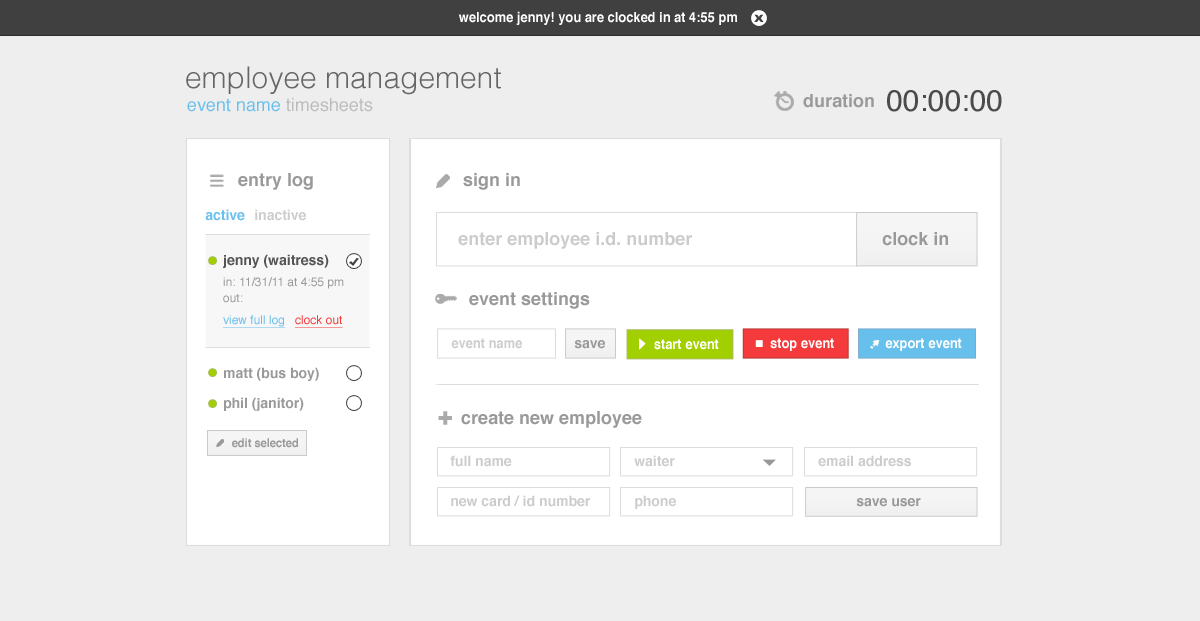
<style>
.page{position:relative;width:1200px;height:621px;background:#eeeeee}
.page>*{position:absolute;margin:0}
.t1{font:14.1px "Helvetica-Bold";color:#ffffff;scale:0.92 1}
.t2{font:14px "Arial-Black";color:#404040}
.t3{font:30px "Helvetica-Light";color:#666666}
.t4{font:18px "Helvetica";color:#67bfec}
.t5{font:18px "Helvetica";color:#bbbbbb}
.t6{font:18px "Helvetica-Bold";color:#999999}
.t7{font:30px "Helvetica";color:#4b4b4b}
.t8{font:14px "Helvetica-Bold";color:#67bfec}
.t9{font:14px "Helvetica-Bold";color:#cccccc}
.t10{font:18px "Helvetica-Bold";color:#cccccc}
.t11{font:14px "Helvetica-Bold";color:#545454}
.t12{font:12px/16px "Helvetica";color:#999999}
.t13{font:12px/22px "Helvetica";color:#67bfec;text-decoration:underline}
.t14{font:12px/22px "Helvetica";color:#f43a3a;text-decoration:underline}
.t15{font:14.1px "Helvetica-Bold";color:#cccccc;scale:0.92 1}
.t16{font:14px "Helvetica-Bold";color:#999999}
.t17{font:25px "Arial-Black";color:#aaaaaa}
.t18{font:12.1px "Helvetica-Bold";color:#999999;scale:0.92 1}
</style>
<div class="page">
<p class="t1" style="left:458px;top:11px;width:279px;height:14px">welcome jenny! you are clocked in at 4:55 pm</p>
<p class="t2" style="left:754px;top:14px;width:10px;height:8px">x</p>
<p class="t3" style="left:186px;top:66px;width:315px;height:29px">employee management</p>
<p class="t4" style="left:187px;top:98px;width:186px;height:14px">event name <span class="t5">timesheets</span></p>
<p class="t6" style="left:803px;top:94px;width:71px;height:14px">duration</p>
<p class="t7" style="left:887px;top:90px;width:115px;height:22px">00:00:00</p>
<p class="t6" style="left:238px;top:173px;width:75px;height:17px">entry log</p>
<p class="t6" style="left:463px;top:173px;width:57px;height:17px">sign in</p>
<p class="t8" style="left:205px;top:209px;width:40px;height:12px">active</p>
<p class="t9" style="left:255px;top:209px;width:51px;height:12px">inactive</p>
<p class="t10" style="left:458px;top:232px;width:234px;height:17px">enter employee i.d. number</p>
<p class="t6" style="left:882px;top:232px;width:66px;height:14px">clock in</p>
<p class="t11" style="left:223px;top:254px;width:106px;height:14px">jenny (waitress)</p>
<p class="t12" style="left:223px;top:277px;width:121px;height:51px">in: 11/31/11 at 4:55 pm<br>out: <br><span class="t13">view full log   </span><span class="t14">clock out</span></p>
<p class="t6" style="left:469px;top:292px;width:121px;height:17px">event settings</p>
<p class="t15" style="left:451px;top:338px;width:71px;height:11px">event name</p>
<p class="t16" style="left:574px;top:340px;width:31px;height:9px">save</p>
<p class="t1" style="left:654px;top:339px;width:65px;height:11px">start event</p>
<p class="t1" style="left:770px;top:338px;width:64px;height:13px">stop event</p>
<p class="t1" style="left:885px;top:338px;width:77px;height:13px">export event</p>
<p class="t16" style="left:224px;top:367px;width:95px;height:14px">matt (bus boy)</p>
<p class="t16" style="left:224px;top:397px;width:80px;height:14px">phil (janitor)</p>
<p class="t17" style="left:438px;top:411px;width:14px;height:14px">+</p>
<p class="t6" style="left:461px;top:411px;width:181px;height:17px">create new employee</p>
<p class="t18" style="left:232px;top:438px;width:66px;height:10px">edit selected</p>
<p class="t9" style="left:450px;top:455px;width:62px;height:12px">full name</p>
<p class="t9" style="left:634px;top:455px;width:41px;height:12px">waiter</p>
<p class="t9" style="left:818px;top:455px;width:93px;height:12px">email address</p>
<p class="t9" style="left:451px;top:495px;width:139px;height:12px">new card / id number</p>
<p class="t9" style="left:635px;top:495px;width:41px;height:14px">phone</p>
<p class="t16" style="left:856px;top:498px;width:65px;height:9px">save user</p>
</div>
